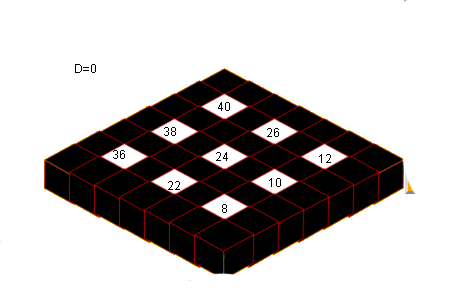
<style>
.page{position:relative;width:453px;height:300px;background:#ffffff}
.page>*{position:absolute;margin:0}
.t1{font:12px "ArialMT";color:#000000}
</style>
<div class="page">
<p class="t1" style="left:75px;top:64px;width:21px;height:9px">D=0</p>
<p class="t1" style="left:218px;top:102px;width:12px;height:9px">40</p>
<p class="t1" style="left:164px;top:127px;width:12px;height:9px">38</p>
<p class="t1" style="left:267px;top:128px;width:12px;height:9px">26</p>
<p class="t1" style="left:113px;top:150px;width:12px;height:9px">36</p>
<p class="t1" style="left:216px;top:152px;width:12px;height:9px">24</p>
<p class="t1" style="left:319px;top:154px;width:12px;height:9px">12</p>
<p class="t1" style="left:168px;top:181px;width:12px;height:9px">22</p>
<p class="t1" style="left:269px;top:178px;width:12px;height:9px">10</p>
<p class="t1" style="left:222px;top:204px;width:5px;height:9px">8</p>
</div>
